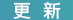
<style>
.page{position:relative;width:73px;height:20px}
.page>*{position:absolute;margin:0}
.t1{font:18px "LiHeiPro";color:#ffffff}
</style>
<div class="page">
<p class="t1" style="left:13px;top:2px;width:48px;height:17px">更  新</p>
</div>
